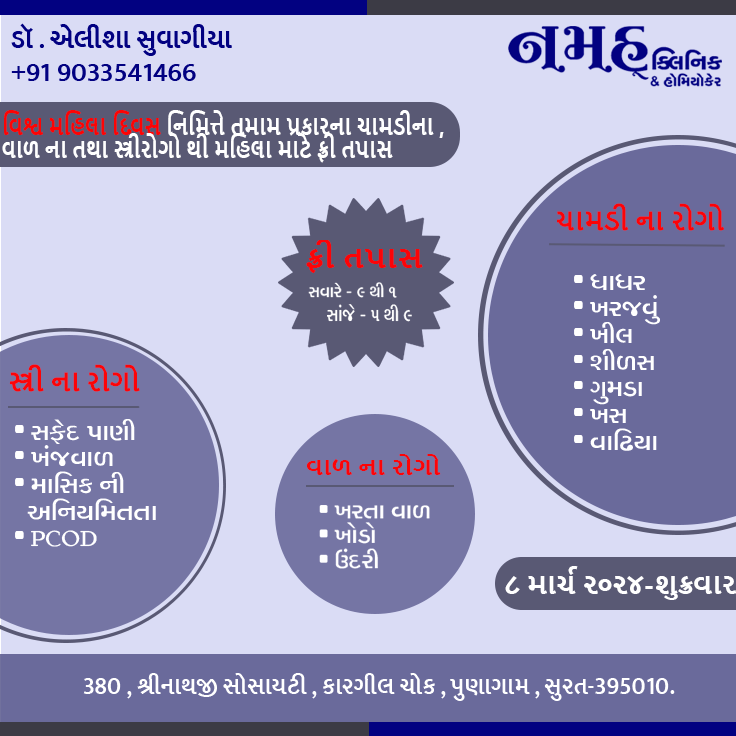
<style>
.page{position:relative;width:736px;height:736px;background:#dadcf5}
.page>*{position:absolute;margin:0}
.t1{font:27.3px "MuktaVaani-SemiBold";color:#020181;text-transform:uppercase}
.t2{font:26.5px "MuktaVaani-SemiBold";color:#020181;text-transform:uppercase}
.t3{font:23.9px/22.8px "NirmalaUI-Bold";color:#ffffff;text-transform:uppercase;scale:0.83 1}
.t4{font:23.9px/22.8px "NirmalaUI-Bold";color:#fd0404;text-transform:uppercase;scale:0.83 1}
.t5{font:26.3px "NirmalaUI-Bold";color:#fc0407;text-transform:uppercase}
.t6{font:26.6px "NirmalaUI-Bold";color:#fc0407;text-transform:uppercase;scale:1.16 1}
.t7{font:28px/26.7px "RAJKOTUNICODE-Regular";color:#ffffff;text-transform:uppercase}
.t8{font:28px/26.7px "AgencyFB-Reg";color:#ffffff;text-transform:uppercase}
.t9{font:19.6px "RAJKOTUNICODE-Regular";color:#ffffff;text-transform:uppercase;scale:0.88 1}
.t10{font:22px "RAJKOTUNICODE-Regular";color:#ffffff;text-transform:uppercase;scale:0.8 1}
.t11{font:22px/26.7px "RAJKOTUNICODE-Regular";color:#ffffff;text-transform:uppercase}
.t12{font:21.7px "NirmalaUI-Bold";color:#fc0407;text-transform:uppercase;scale:1.1 1}
.t13{font:26px/24.8px "RAJKOTUNICODE-Regular";color:#ffffff;text-transform:uppercase}
.t14{font:26px/24.8px "AgencyFB-Reg";color:#ffffff;text-transform:uppercase}
.t15{font:25.5px "NirmalaUI-Bold";color:#ffffff;text-transform:uppercase;scale:1.05 1}
.t16{font:24px "MuktaVaani-SemiBold";color:#ffffff;text-transform:uppercase}
</style>
<div class="page">
<p class="t1" style="left:11px;top:23px;width:221px;height:33px">ડૉ . એલીશા સુવાગીયા</p>
<p class="t2" style="left:11px;top:64px;width:185px;height:17px">+91 9033541466</p>
<p class="t3" style="left:2px;top:110px;width:442px;height:53px"><span class="t4">વિશ્વ મહિલા દિવસ </span>નિમિત્તે તમામ પ્રકારના ચામડીના , <br>વાળ ના તથા સ્ત્રીરોગો થી મહિલા માટે ફ્રી તપાસ</p>
<p class="t5" style="left:557px;top:203px;width:168px;height:28px">ચામડી ના રોગો</p>
<p class="t6" style="left:306px;top:240px;width:117px;height:33px">ફ્રી તપાસ</p>
<p class="t7" style="left:574px;top:274px;width:86px;height:177px"><span class="t8">• </span>ધાધર<br><span class="t8">• </span>ખરજવું <br><span class="t8">• </span>ખીલ<br><span class="t8">• </span>શીળસ <br><span class="t8">• </span>ગુમડા<br><span class="t8">• </span>ખસ <br><span class="t8">• </span>વાઢિયા</p>
<p class="t9" style="left:308px;top:282px;width:89px;height:16px">સવારે - ૯ થી ૧</p>
<p class="t10" style="left:327px;top:304px;width:85px;height:18px">સાંજે - ૫ થી ૯</p>
<p class="t5" style="left:9px;top:364px;width:131px;height:28px">સ્ત્રી ના રોગો</p>
<p class="t7" style="left:15px;top:419px;width:141px;height:128px"><span class="t8">• </span>સફેદ પાણી<br><span class="t8">• </span>ખંજવાળ  <br><span class="t8">• </span>માસિક ની <br>  અનિયમિતતા<br><span class="t8">• </span><span class="t11">Pcod</span></p>
<p class="t12" style="left:306px;top:454px;width:135px;height:21px">વાળ ના રોગો</p>
<p class="t13" style="left:319px;top:505px;width:111px;height:64px"><span class="t14">• </span>ખરતા વાળ<br><span class="t14">• </span>ખોડો<br><span class="t14">• </span>ઉંદરી</p>
<p class="t15" style="left:505px;top:566px;width:232px;height:34px">૮ માર્ચ ૨૦૨૪-શુક્રવાર</p>
<p class="t16" style="left:83px;top:673px;width:592px;height:28px">380 , શ્રીનાથજી સોસાયટી , કારગીલ ચોક , પુણાગામ , સુરત-395010.</p>
</div>
